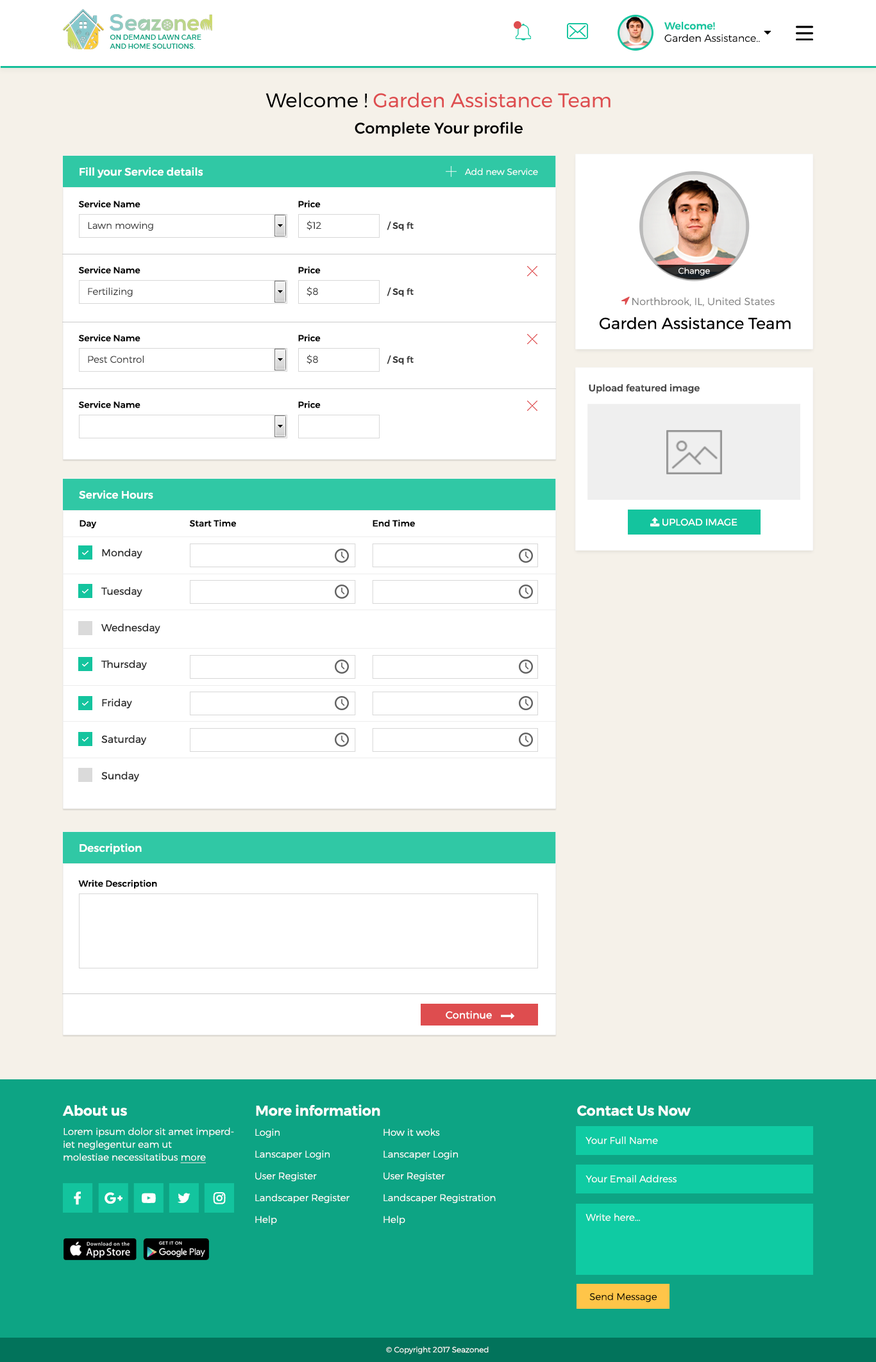
<style>
.page{position:relative;width:876px;height:1362px;background:#ffffff}
.page>*{position:absolute;margin:0}
.t1{font:10.3px "Montserrat-Light";color:#000000}
.t2{font:10.3px "Montserrat-Medium";color:#13c49e}
.t3{font:7.1px "Montserrat-Medium";color:#0da484;text-transform:uppercase}
.t4{font:19.9px "Montserrat-Regular";color:#de4d4f}
.t5{font:19.9px "Montserrat-Regular";color:#000000}
.t6{font:15.4px/26.3px "Montserrat-Medium";color:#000000}
.t7{font:10.9px "Montserrat-Medium";color:#ffffff}
.t8{font:9px "Montserrat-Light";color:#ffffff}
.t9{font:9px "Montserrat-Medium";color:#000000}
.t10{font:9.6px "Montserrat-Light";color:#383838}
.t11{font:9px "Montserrat-Medium";color:#383838}
.t12{font:8.3px "Montserrat-Light";color:#ffffff}
.t13{font:10.3px "Montserrat-Light";color:#808080}
.t14{font:16px "Montserrat-Regular";color:#000000}
.t15{font:9.6px "Montserrat-Medium";color:#484848}
.t16{font:10.3px "Montserrat-Regular";color:#2d2d2d}
.t17{font:10.3px "Montserrat-Regular";color:#ffffff}
.t18{font:14.1px "Montserrat-SemiBold";color:#ffffff}
.t19{font:9.6px/12.8px "Montserrat-Light";color:#ffffff}
.t20{font:9.6px/12.8px "Montserrat-Light";color:#ffffff;text-decoration:underline}
.t21{font:9.6px/21.8px "Montserrat-Light";color:#ffffff}
.t22{font:9.6px "Montserrat-Light";color:#ffffff}
.t23{font:9.6px "Montserrat-Light";color:#000000}
.t24{font:7.7px "Montserrat-Light";color:#ffffff}
</style>
<div class="page">
<p class="t1" style="left:664px;top:22px;width:96px;height:20px"><span class="t2">Welcome! <br></span>Garden Assistance..</p>
<p class="t3" style="left:110px;top:35px;width:91px;height:14px">on demand lawn care <br>and home solutions.</p>
<p class="t4" style="left:265px;top:92px;width:345px;height:45px;text-align:center"><span class="t5">Welcome ! </span>Garden Assistance Team<br><span class="t6">Complete Your profile</span></p>
<p class="t7" style="left:79px;top:167px;width:124px;height:11px">Fill your Service details</p>
<p class="t8" style="left:465px;top:168px;width:73px;height:8px">Add new Service</p>
<p class="t9" style="left:78px;top:200px;width:62px;height:8px">Service Name</p>
<p class="t9" style="left:298px;top:200px;width:22px;height:8px">Price</p>
<p class="t10" style="left:88px;top:222px;width:65px;height:9px">Lawn mowing</p>
<p class="t10" style="left:306px;top:220px;width:15px;height:10px">$12</p>
<p class="t11" style="left:386px;top:221px;width:27px;height:10px">/ Sq ft</p>
<p class="t9" style="left:78px;top:266px;width:62px;height:8px">Service Name</p>
<p class="t9" style="left:298px;top:266px;width:22px;height:8px">Price</p>
<p class="t12" style="left:678px;top:267px;width:32px;height:9px">Change</p>
<p class="t10" style="left:88px;top:287px;width:45px;height:10px">Fertilizing</p>
<p class="t10" style="left:306px;top:286px;width:12px;height:10px">$8</p>
<p class="t11" style="left:386px;top:287px;width:27px;height:10px">/ Sq ft</p>
<p class="t13" style="left:632px;top:297px;width:142px;height:9px">Northbrook, IL, United States</p>
<p class="t14" style="left:599px;top:317px;width:191px;height:12px">Garden Assistance Team</p>
<p class="t9" style="left:78px;top:334px;width:62px;height:8px">Service Name</p>
<p class="t9" style="left:298px;top:334px;width:22px;height:8px">Price</p>
<p class="t10" style="left:88px;top:355px;width:56px;height:8px">Pest Control</p>
<p class="t10" style="left:306px;top:354px;width:12px;height:10px">$8</p>
<p class="t11" style="left:386px;top:355px;width:27px;height:10px">/ Sq ft</p>
<p class="t15" style="left:588px;top:384px;width:111px;height:10px">Upload featured image</p>
<p class="t9" style="left:78px;top:401px;width:62px;height:7px">Service Name</p>
<p class="t9" style="left:298px;top:401px;width:22px;height:7px">Price</p>
<p class="t7" style="left:79px;top:490px;width:74px;height:9px">Service Hours</p>
<p class="t9" style="left:79px;top:520px;width:18px;height:9px">Day</p>
<p class="t9" style="left:189px;top:519px;width:47px;height:8px">Start Time</p>
<p class="t9" style="left:372px;top:519px;width:43px;height:8px">End Time</p>
<p class="t16" style="left:102px;top:549px;width:40px;height:10px">Monday</p>
<p class="t16" style="left:101px;top:587px;width:41px;height:10px">Tuesday</p>
<p class="t16" style="left:101px;top:624px;width:59px;height:10px">Wednesday</p>
<p class="t16" style="left:101px;top:660px;width:46px;height:10px">Thursday</p>
<p class="t16" style="left:102px;top:699px;width:30px;height:10px">Friday</p>
<p class="t16" style="left:101px;top:735px;width:46px;height:10px">Saturday</p>
<p class="t16" style="left:101px;top:772px;width:38px;height:10px">Sunday</p>
<p class="t7" style="left:79px;top:843px;width:63px;height:11px">Description</p>
<p class="t9" style="left:78px;top:879px;width:79px;height:10px">Write Description</p>
<p class="t17" style="left:445px;top:1011px;width:47px;height:8px">Continue</p>
<p class="t18" style="left:63px;top:1105px;width:64px;height:11px">About us</p>
<p class="t18" style="left:256px;top:1104px;width:124px;height:12px">More information</p>
<p class="t18" style="left:577px;top:1105px;width:113px;height:11px">Contact Us Now</p>
<p class="t19" style="left:63px;top:1127px;width:171px;height:36px">Lorem ipsum dolor sit amet imperdiet neglegentur eam ut<br>molestiae necessitatibus <span class="t20">more</span></p>
<p class="t21" style="left:255px;top:1129px;width:94px;height:96px">Login<br>Lanscaper Login<br>User Register<br>Landscaper Register<br>Help</p>
<p class="t21" style="left:383px;top:1128px;width:112px;height:97px">How it woks<br>Lanscaper Login<br>User Register<br>Landscaper Registration<br>Help</p>
<p class="t22" style="left:585px;top:1136px;width:73px;height:8px">Your Full Name</p>
<p class="t22" style="left:585px;top:1175px;width:91px;height:8px">Your Email Address</p>
<p class="t22" style="left:585px;top:1213px;width:55px;height:8px">Write here...</p>
<p class="t23" style="left:589px;top:1293px;width:67px;height:9px">Send Message</p>
<p class="t24" style="left:386px;top:1347px;width:102px;height:7px">© Copyright 2017 Seazoned</p>
</div>
